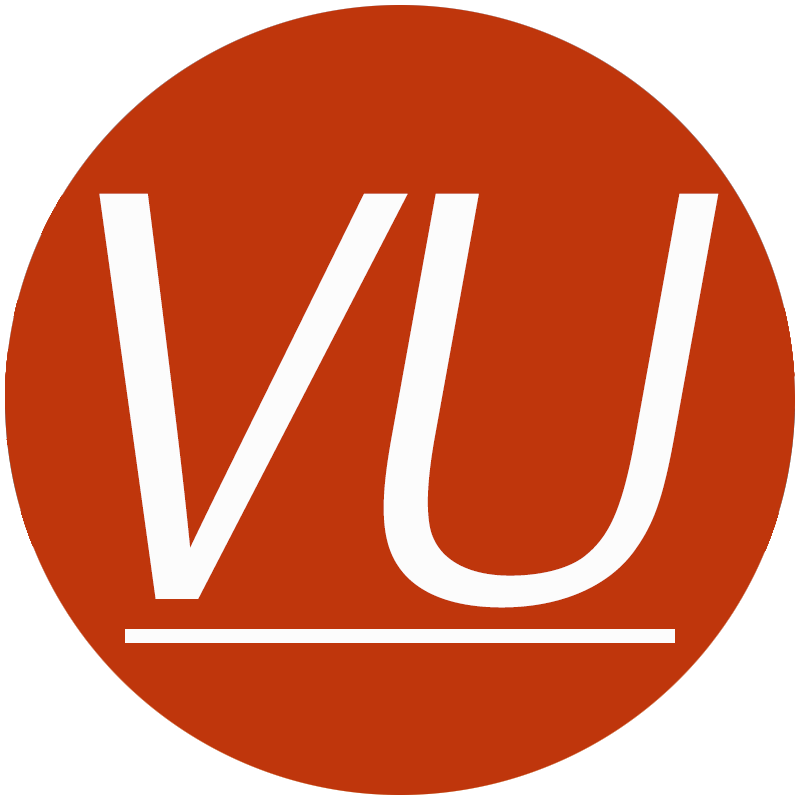
<style>
.page{position:relative;width:800px;height:800px;background:#bf360c}
.page>*{position:absolute;margin:0}
.t1{font:573.5px "EpocaClassic-Light";letter-spacing:-0.05em;color:#fcfcfc;font-style:italic;scale:0.93 1}
</style>
<div class="page">
<p class="t1" style="left:99px;top:193px;width:620px;height:415px">VU</p>
</div>
